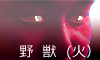
<style>
.page{position:relative;width:100px;height:60px}
.page>*{position:absolute;margin:0}
.t1{font:14px "MeiryoUI";color:#ffffff}
</style>
<div class="page">
<p class="t1" style="left:19px;top:44px;width:72px;height:16px">野　獣　(火）</p>
</div>
